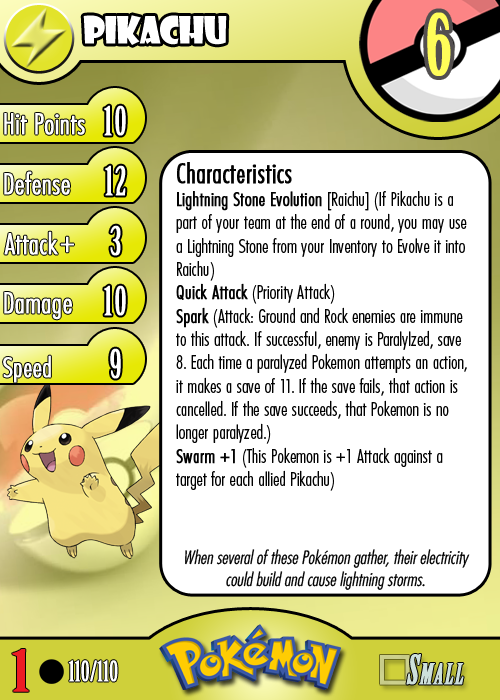
<style>
.page{position:relative;width:500px;height:700px;background:#ffffff}
.page>*{position:absolute;margin:0}
.t1{font:36.7px "ShowcardGothic-Reg";letter-spacing:-0.025em;color:#ffffff;scale:0.91 1}
.t2{font:83.3px "BirchStd";letter-spacing:0.025em;color:#fffd59;font-weight:bold}
.t3{font:27.8px "Futura-CondensedLight";color:#ffffff;font-weight:bold}
.t4{font:38.9px "BirchStd";letter-spacing:0.035em;color:#ffffff;font-weight:bold}
.t5{font:19.4px "FuturaCondensedBQ-Light";color:#010101}
.t6{font:27.8px "FuturaCondensedBQ-Light";color:#010101;font-weight:bold}
.t7{font:19.4px "FuturaCondensedBQ-Light";color:#010101;font-weight:bold}
.t8{font:30.6px "Futura-CondensedLight";color:#ffffff;font-weight:bold}
.t9{font:27.8px "FuturaCondensedBQ-Light";color:#ffffff;font-weight:bold}
.t10{font:18.1px "Futura-CondensedLight";color:#010101;font-style:italic}
.t11{font:55.6px "BirchStd";color:#ed1c24;font-weight:bold;scale:1.5 1}
.t12{font:27.8px "BirchStd";color:#ffffff;font-weight:bold}
</style>
<div class="page">
<p class="t1" style="left:83px;top:15px;width:144px;height:30px">pikachu</p>
<p class="t2" style="left:427px;top:12px;width:24px;height:64px">6</p>
<p class="t3" style="left:4px;top:113px;width:81px;height:22px">Hit Points</p>
<p class="t4" style="left:104px;top:105px;width:22px;height:31px">10</p>
<p class="t3" style="left:4px;top:171px;width:66px;height:24px">Defense</p>
<p class="t4" style="left:105px;top:165px;width:21px;height:31px">12</p>
<p class="t5" style="left:176px;top:162px;width:291px;height:329px"><span class="t6">Characteristics<br></span><span class="t7">Lightning Stone Evolution </span>[Raichu] (If Pikachu is a part of your team at the end of a round, you may use a Lightning Stone from your Inventory to Evolve it into Raichu)<br><span class="t7">Quick Attack</span> (Priority Attack)<br><span class="t7">Spark</span> (Attack: Ground and Rock enemies are immune to this attack. If successful, enemy is Paralylzed, save 8. Each time a paralyzed Pokemon attempts an action, it makes a save of 11. If the save fails, that action is cancelled. If the save succeeds, that Pokemon is no longer paralyzed.)<br><span class="t7">Swarm +1</span> (This Pokemon is +1 Attack against a target for each allied Pikachu)</p>
<p class="t3" style="left:4px;top:231px;width:54px;height:24px">Attack</p>
<p class="t4" style="left:110px;top:225px;width:11px;height:31px">3</p>
<p class="t8" style="left:60px;top:236px;width:14px;height:17px">+</p>
<p class="t3" style="left:4px;top:292px;width:68px;height:28px">Damage</p>
<p class="t4" style="left:104px;top:285px;width:22px;height:31px">10</p>
<p class="t4" style="left:110px;top:348px;width:11px;height:31px">9</p>
<p class="t9" style="left:3px;top:355px;width:48px;height:28px">Speed</p>
<p class="t10" style="left:185px;top:549px;width:285px;height:41px;text-align:center">When several of these Pokémon gather, their electricity could build and cause lightning storms.</p>
<p class="t11" style="left:12px;top:649px;width:17px;height:43px">1</p>
<p class="t12" style="left:68px;top:660px;width:50px;height:22px">110/110</p>
</div>
